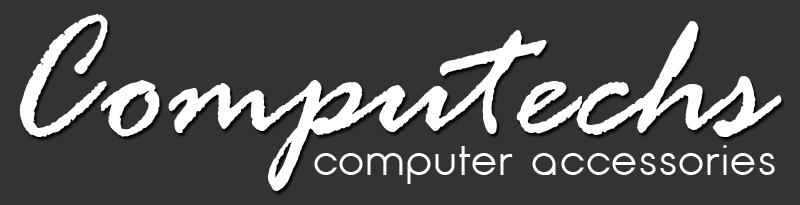
<style>
.page{position:relative;width:800px;height:205px;background:#333333}
.page>*{position:absolute;margin:0}
.t1{font:186.5px "RageItalic";color:#ffffff}
.t2{font:41.3px "OpificioNeue";color:#ffffff}
</style>
<div class="page">
<p class="t1" style="left:19px;top:14px;width:763px;height:177px">Computechs</p>
<p class="t2" style="left:314px;top:145px;width:461px;height:39px">computer accessories</p>
</div>
